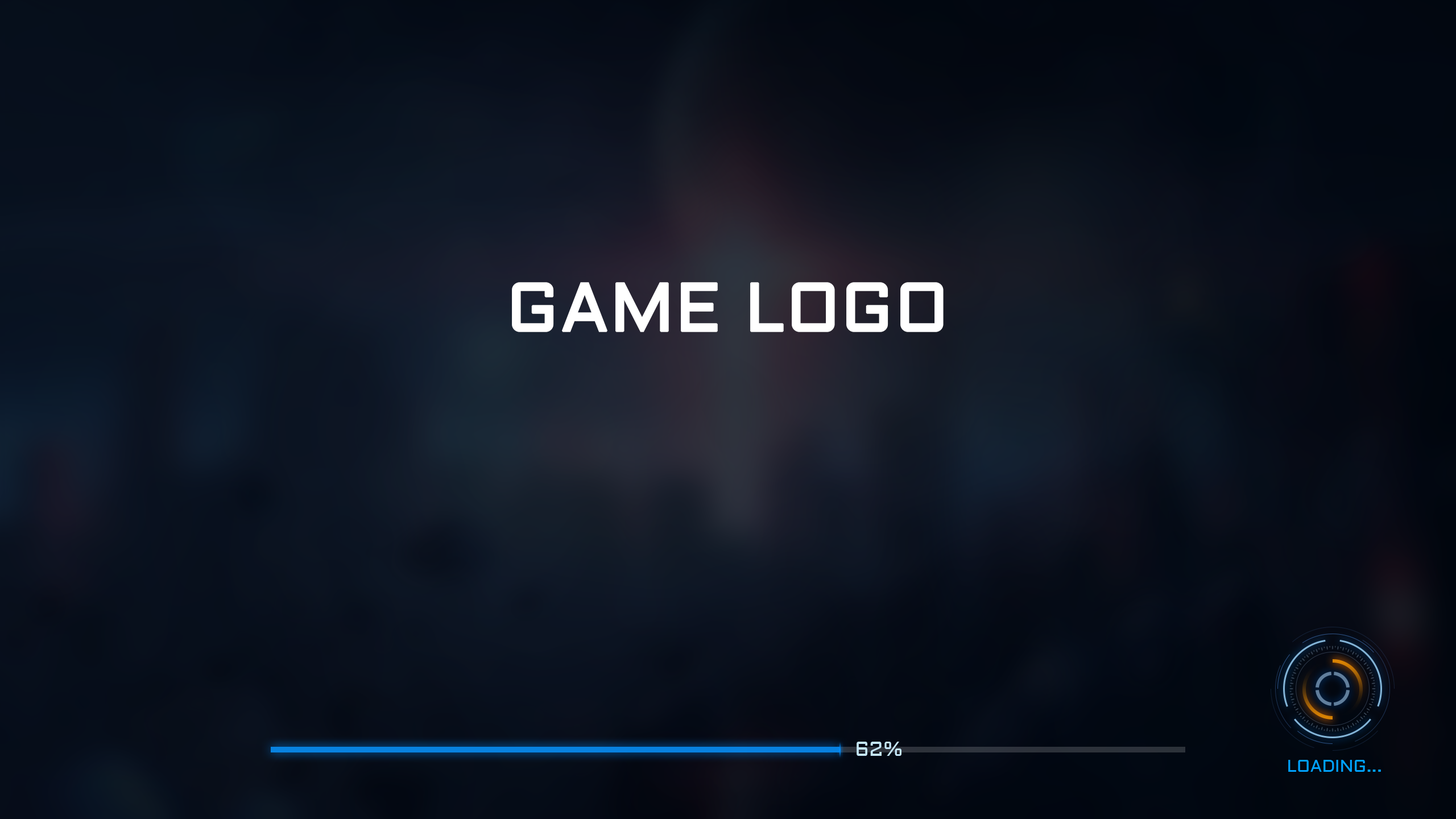
<style>
.page{position:relative;width:1456px;height:819px}
.page>*{position:absolute;margin:0}
.t1{font:68.2px "Aldrich";color:#ffffff;font-weight:bold}
.t2{font:20.5px "Aldrich";color:#c5e6f9}
.t3{font:17.1px "Aldrich";color:#00a2ff}
</style>
<div class="page">
<p class="t1" style="left:512px;top:282px;width:432px;height:50px">GAME LOGO</p>
<p class="t2" style="left:857px;top:742px;width:44px;height:14px">62%</p>
<p class="t3" style="left:1288px;top:760px;width:93px;height:12px">LOADING...</p>
</div>
